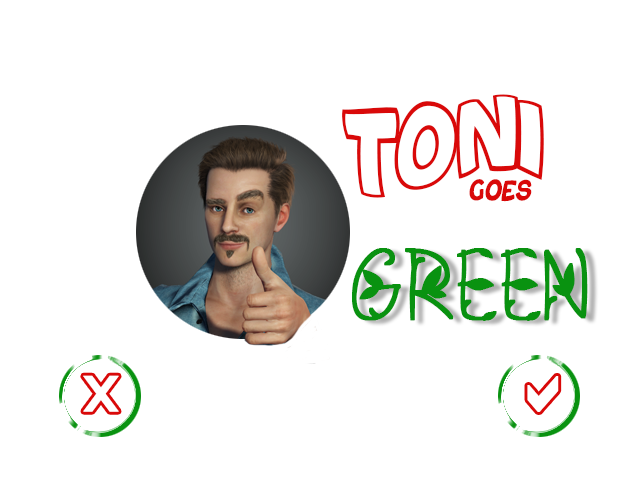
<style>
.page{position:relative;width:640px;height:480px;background:#ffffff}
.page>*{position:absolute;margin:0}
.t1{font:98.6px "Bouncy-PERSONALUSEONLY";letter-spacing:0.02em;color:#d90909;scale:0.87 1}
.t2{font:40.3px "Bouncy-ThinPERSONALUSEONLY";letter-spacing:0.02em;color:#d90909;font-variant:small-caps;font-style:italic;scale:0.87 1}
.t3{font:100.8px "GREENNATURE";letter-spacing:0.02em;color:#099210;font-weight:bold;scale:0.87 1}
.t4{font:50.4px "Audiowide-Regular";letter-spacing:0.02em;color:#ffffff;font-weight:bold;scale:0.87 1}
</style>
<div class="page">
<p class="t1" style="left:342px;top:94px;width:202px;height:104px">TONI</p>
<p class="t2" style="left:469px;top:179px;width:63px;height:23px">goes</p>
<p class="t3" style="left:352px;top:248px;width:236px;height:73px">GREEN</p>
<p class="t4" style="left:83px;top:375px;width:36px;height:37px">X</p>
</div>
